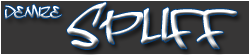
<style>
.page{position:relative;width:250px;height:55px;background:#373636}
.page>*{position:absolute;margin:0}
.t1{font:18px "DopeJam";text-transform:uppercase}
.t2{font:60px "DopeJam";text-transform:uppercase}
</style>
<div class="page">
<p class="t1" style="left:5px;top:4px;width:57px;height:15px">demize</p>
<p class="t2" style="left:67px;top:2px;width:170px;height:47px">spliff</p>
</div>
